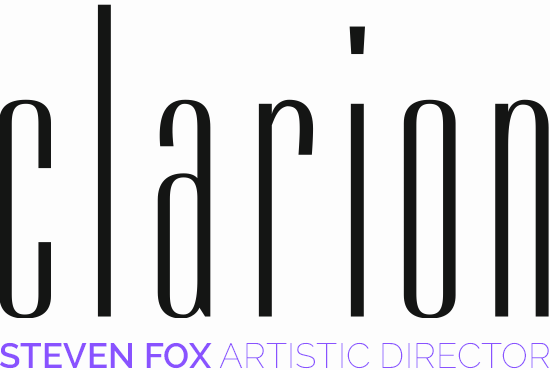
<style>
.page{position:relative;width:550px;height:370px;background:#fdfdfd}
.page>*{position:absolute;margin:0}
.t1{font:35.1px "Raleway-ExtraLight";color:#8952ff}
.t2{font:35.1px "Raleway-SemiBold";color:#8952ff}
</style>
<div class="page">
<p class="t1" style="left:0px;top:342px;width:549px;height:27px"><span class="t2">STEVEN FOX </span>ARTISTIC DIRECTOR</p>
</div>
